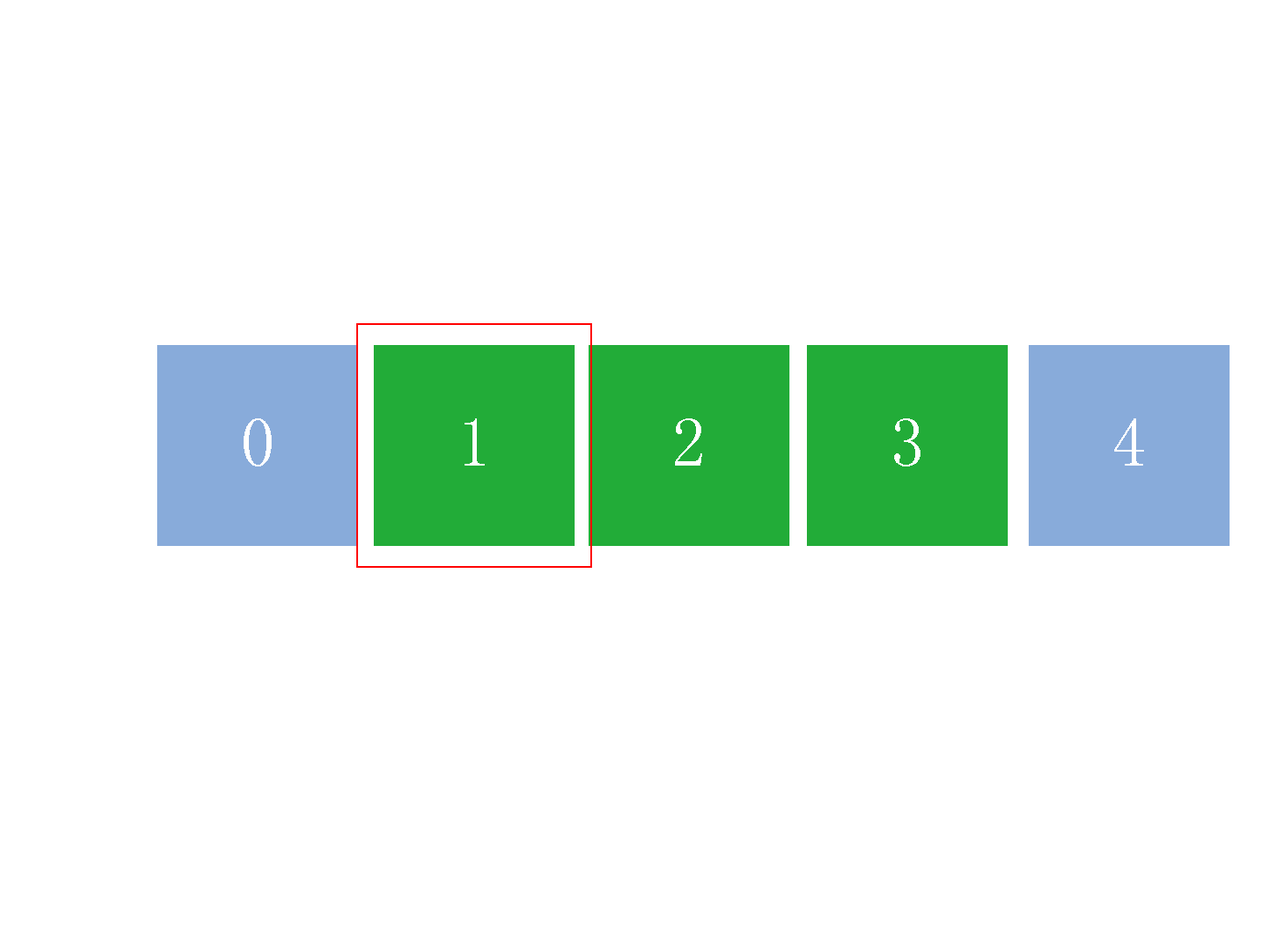
<style>
.page{position:relative;width:1261px;height:946px;background:#ffffff}
.page>*{position:absolute;margin:0}
.t1{font:69px "SimSun";letter-spacing:0.02em;color:#ffffff}
</style>
<div class="page">
<p class="t1" style="left:244px;top:418px;width:28px;height:48px">0</p>
<p class="t1" style="left:465px;top:418px;width:20px;height:47px">1</p>
<p class="t1" style="left:675px;top:418px;width:27px;height:47px">2</p>
<p class="t1" style="left:894px;top:418px;width:26px;height:48px">3</p>
<p class="t1" style="left:1114px;top:418px;width:30px;height:47px">4</p>
</div>
